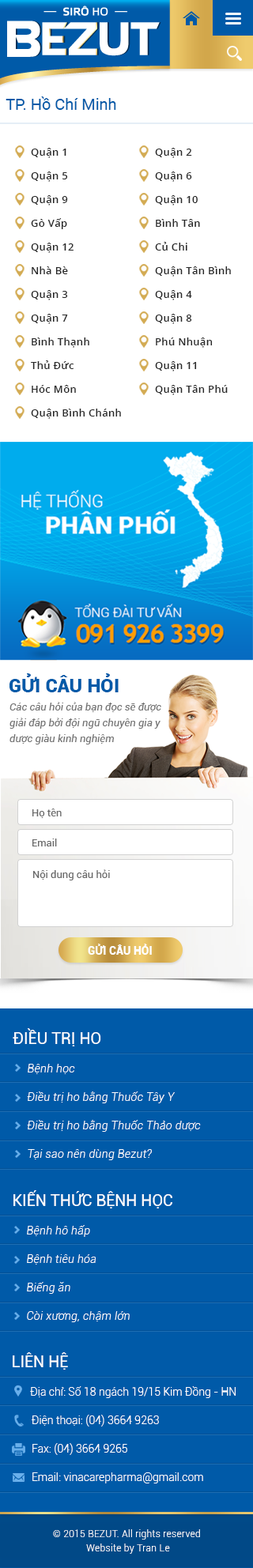
<style>
.page{position:relative;width:253px;height:1568px;background:#ffffff}
.page>*{position:absolute;margin:0}
.t1{font:15.8px "Roboto-Regular";color:#005aa8}
.t2{font:10.3px/23.7px "OpenSans-Semibold";letter-spacing:0.025em;color:#282828}
.t3{font:19px "Roboto-Black";color:#005aa8;text-transform:uppercase}
.t4{font:10.3px/15.8px "Roboto-Italic";color:#747474}
.t5{font:10.3px "Roboto-Regular";color:#686868}
.t6{font:11.1px "Roboto-Black";color:#ffffff;text-transform:uppercase}
.t7{font:11.1px/28.5px "Roboto-LightItalic";letter-spacing:0.025em;color:#ffffff}
.t8{font:14.2px/20.5px "Roboto-Regular";color:#1ed107;text-transform:uppercase}
.t9{font:15.8px/20.5px "Roboto-Regular";color:#ffffff;text-transform:uppercase}
.t10{font:11.1px/23.7px "Roboto-LightItalic";letter-spacing:0.025em;color:#ffffff}
.t11{font:11.1px/20.5px "Roboto-Light";color:#ffffff}
.t12{font:11.1px/28.5px "Roboto-Light";color:#ffffff}
.t13{font:11.1px/23.7px "Roboto-Light";color:#ffffff}
.t14{font:9.5px/14.2px "Roboto-Light";letter-spacing:0.025em;color:#ffffff}
</style>
<div class="page">
<p class="t1" style="left:6px;top:96px;width:110px;height:14px">TP. Hồ Chí Minh</p>
<p class="t2" style="left:31px;top:148px;width:43px;height:126px;text-align:justify">Quận 1<br>Quận 5<br>Quận 9<br>Gò Vấp<br>Quận 12<br>Nhà Bè</p>
<p class="t2" style="left:155px;top:148px;width:76px;height:129px;text-align:justify">Quận 2<br>Quận 6<br>Quận 10<br>Bình Tân<br>Củ Chi<br>Quận Tân Bình</p>
<p class="t2" style="left:31px;top:290px;width:90px;height:129px;text-align:justify">Quận 3<br>Quận 7<br>Bình Thạnh<br>Thủ Đức<br>Hóc Môn<br>Quận Bình Chánh</p>
<p class="t2" style="left:155px;top:290px;width:73px;height:105px;text-align:justify">Quận 4<br>Quận 8<br>Phú Nhuận<br>Quận 11<br>Quận Tân Phú<br>Lạng sơn</p>
<p class="t3" style="left:9px;top:673px;width:110px;height:19px">Gửi câu hỏi</p>
<p class="t4" style="left:9px;top:702px;width:152px;height:42px">Các câu hỏi của bạn đọc sẽ được giải đáp bởi đội ngũ chuyên gia y dược giàu kinh nghiệm</p>
<p class="t5" style="left:32px;top:808px;width:30px;height:10px">Họ tên</p>
<p class="t5" style="left:32px;top:839px;width:25px;height:7px">Email</p>
<p class="t5" style="left:33px;top:869px;width:77px;height:11px">Nội dung câu hỏi</p>
<p class="t6" style="left:88px;top:944px;width:64px;height:11px">Gửi câu hỏi</p>
<p class="t7" style="left:13px;top:1028px;width:188px;height:132px;text-align:justify"><span class="t8">    </span><span class="t9">điều trị ho<br> </span>Bệnh <span class="t10">học<br> </span>Điều trị ho bằng Thuốc Tây Y<br> Điều trị ho bằng Thuốc Thảo dược<br> Tại sao nên dùng Bezut?</p>
<p class="t7" style="left:13px;top:1190px;width:159px;height:132px;text-align:justify"><span class="t8">    </span><span class="t9">kiến thức bệnh học<br> </span>Bệnh <span class="t10">hô hấp<br> </span>Bệnh tiêu hóa<br> Biếng ăn<br> Còi xương, chậm lớn</p>
<p class="t11" style="left:13px;top:1352px;width:223px;height:131px;text-align:justify"><span class="t8">    </span><span class="t9">liên hệ<br>   </span><span class="t12">Địa c</span><span class="t13">hỉ: Số 18 ngách 19/15 Kim Đồng - HN<br>   </span><span class="t12">Điện thoại: (04) 3664 9263<br>   </span>Fax: (04) 3664 9265<br>   Email: vinacarepharma@gmail.com</p>
<p class="t14" style="left:53px;top:1529px;width:147px;height:25px;text-align:center">© 2015 BEZUT. All rights reserved <br>Website by Tran Le</p>
</div>
